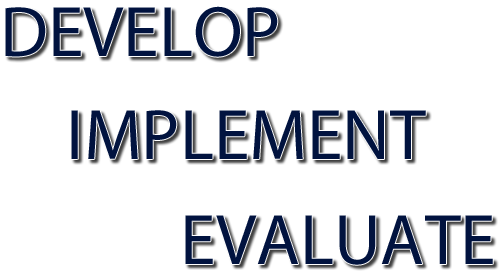
<style>
.page{position:relative;width:500px;height:276px;background:#ffffff}
.page>*{position:absolute;margin:0}
.t1{font:72px "MyriadPro-Regular";color:#01133f}
</style>
<div class="page">
<p class="t1" style="left:5px;top:6px;width:273px;height:51px">DEVELOP</p>
<p class="t1" style="left:71px;top:110px;width:355px;height:49px">IMPLEMENT</p>
<p class="t1" style="left:185px;top:215px;width:308px;height:50px">EVALUATE</p>
</div>
